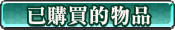
<style>
.page{position:relative;width:175px;height:30px}
.page>*{position:absolute;margin:0}
.t1{font:20px "RyuminPr6N-ExBold";letter-spacing:0.075em;color:#fff6f3}
</style>
<div class="page">
<p class="t1" style="left:28px;top:6px;width:122px;height:20px">已購買的物品</p>
</div>
